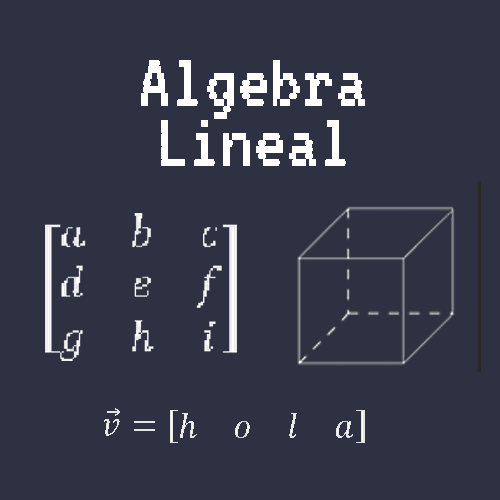
<style>
.page{position:relative;width:500px;height:500px;background:#2d3142}
.page>*{position:absolute;margin:0}
.t1{font:82px/60px "VT323-Regular";color:#ffffff}
</style>
<div class="page">
<p class="t1" style="left:141px;top:60px;width:224px;height:106px;text-align:center">Algebra<br>Lineal</p>
</div>
